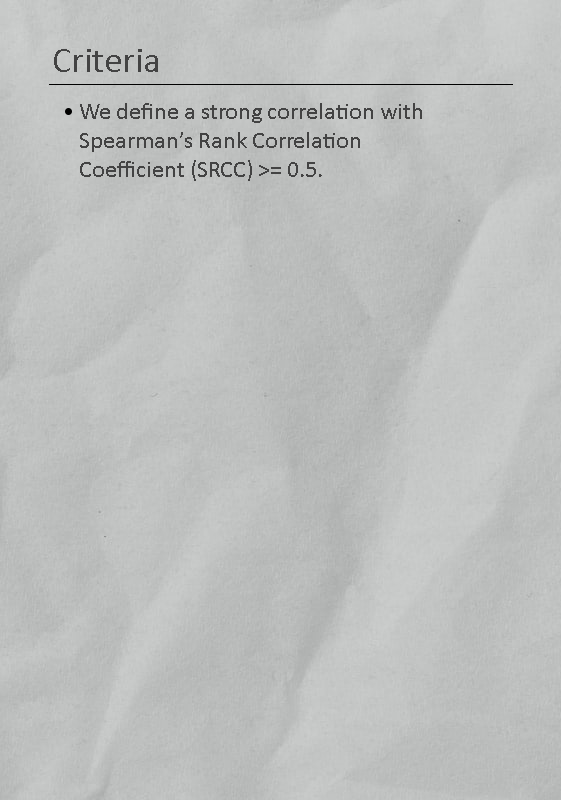
<style>
.page{position:relative;width:561px;height:800px}
.page>*{position:absolute;margin:0}
.t1{font:36px "Calibri";color:#434343}
.t2{font:24px "Calibri";color:#434343}
</style>
<div class="page">
<p class="t1" style="left:54px;top:49px;width:104px;height:23px">Criteria</p>
<p class="t2" style="left:80px;top:103px;width:342px;height:78px">We define a strong correlation with <br>Spearman’s Rank Correlation <br>Coefficient (SRCC) &gt;= 0.5.</p>
</div>
